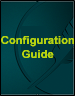
<style>
.page{position:relative;width:75px;height:96px}
.page>*{position:absolute;margin:0}
.t1{font:11.3px "Arial-BoldMT";color:#b7d310}
</style>
<div class="page">
<p class="t1" style="left:1px;top:36px;width:73px;height:22px;text-align:center">Configuration<br>Guide</p>
</div>
